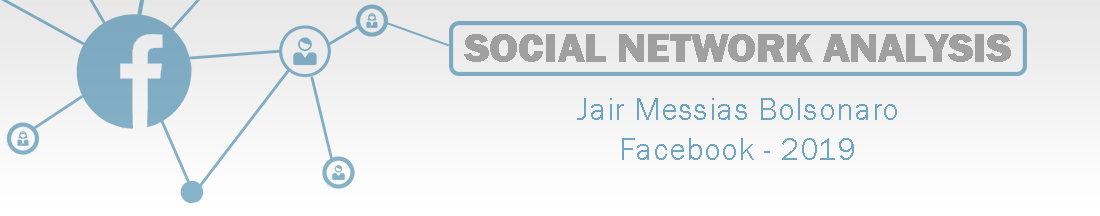
<style>
.page{position:relative;width:1100px;height:216px}
.page>*{position:absolute;margin:0}
.t1{font:41.7px/58.3px "FranklinGothic-Heavy";color:#898989}
.t2{font:33.3px/58.3px "FranklinGothic-Book";color:#388db6}
.t3{font:33.3px "FranklinGothic-Book";color:#388db6}
</style>
<div class="page">
<p class="t1" style="left:464px;top:34px;width:547px;height:126px;text-align:center;opacity:0.8">SOCIAL NETWORK ANALYSIS<br><span class="t2">Jair Messias Bolsonaro<br></span><span class="t3">Facebook - 2019</span></p>
</div>
